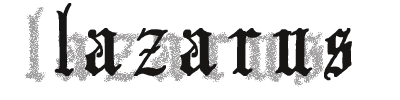
<style>
.page{position:relative;width:400px;height:100px;background:#ffffff}
.page>*{position:absolute;margin:0}
.t1{font:72px "English-Gothic,-17th-c.-Regular";letter-spacing:0.1em;color:#181515;font-weight:bold}
</style>
<div class="page">
<p class="t1" style="left:54px;top:3px;width:298px;height:78px">lazarus</p>
</div>
